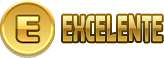
<style>
.page{position:relative;width:164px;height:58px;background:#ffffff}
.page>*{position:absolute;margin:0}
.t1{font:32px "KurokaneStd-EB";scale:0.48 1}
</style>
<div class="page">
<p class="t1" style="left:63px;top:15px;width:99px;height:27px">EXCELENTE</p>
</div>
